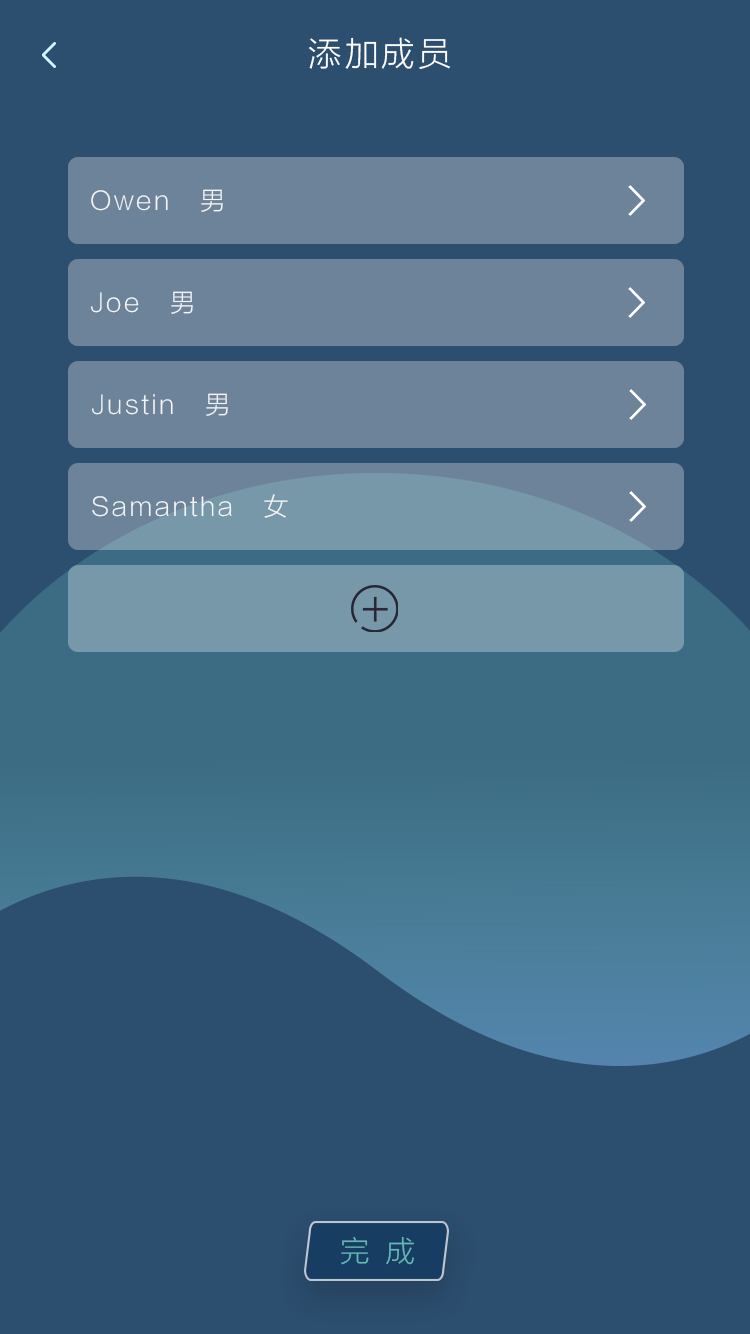
<style>
.page{position:relative;width:750px;height:1334px;background:#2c4e6f}
.page>*{position:absolute;margin:0}
.t1{font:33.3px "FZLTXHJW--GB1-0";letter-spacing:0.1em;color:#ffffff}
.t2{font:25px "FZLTXHJW--GB1-0";letter-spacing:0.1em;color:#ffffff}
.t3{font:25px "FZLTXHJW--GB1-0";letter-spacing:0.1em;color:#fefefe}
.t4{font:29.2px "FZLTXHJW--GB1-0";color:#63b7b6}
</style>
<div class="page">
<p class="t1" style="left:309px;top:37px;width:141px;height:32px">添加成员</p>
<p class="t2" style="left:91px;top:189px;width:132px;height:23px;opacity:0.9">Owen   男</p>
<p class="t2" style="left:90px;top:291px;width:103px;height:23px;opacity:0.9">Joe   男</p>
<p class="t3" style="left:91px;top:393px;width:137px;height:23px;opacity:0.9">Justin   男</p>
<p class="t2" style="left:92px;top:494px;width:196px;height:24px;opacity:0.9">Samantha   女</p>
<p class="t4" style="left:341px;top:1236px;width:73px;height:29px">完  成</p>
</div>
